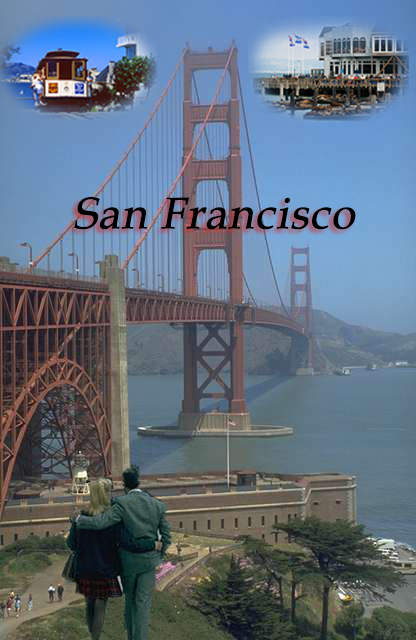
<style>
.page{position:relative;width:416px;height:640px}
.page>*{position:absolute;margin:0}
.t1{font:44px "BookAntiqua";color:#000000;font-weight:bold;font-style:italic}
</style>
<div class="page">
<p class="t1" style="left:74px;top:197px;width:282px;height:33px">San Francisco</p>
</div>
